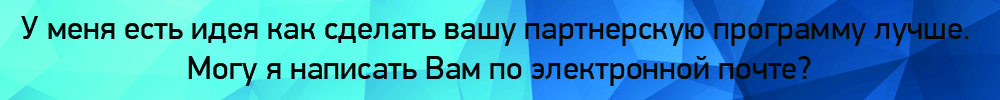
<style>
.page{position:relative;width:1000px;height:100px}
.page>*{position:absolute;margin:0}
.t1{font:33.3px "PFDinDisplayPro-Regular";color:#060808}
</style>
<div class="page">
<p class="t1" style="left:21px;top:16px;width:948px;height:70px;text-align:center">У меня есть идея как сделать вашу партнерскую программу лучше. <br>Могу я написать Вам по электронной почте?</p>
</div>
